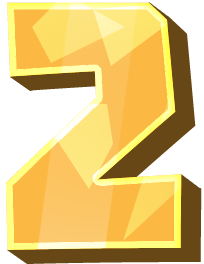
<style>
.page{position:relative;width:204px;height:264px;background:#ffffff}
.page>*{position:absolute;margin:0}
.t1{font:399.6px "Troika"}
</style>
<div class="page">
<p class="t1" style="left:5px;top:2px;width:177px;height:249px">2</p>
</div>
